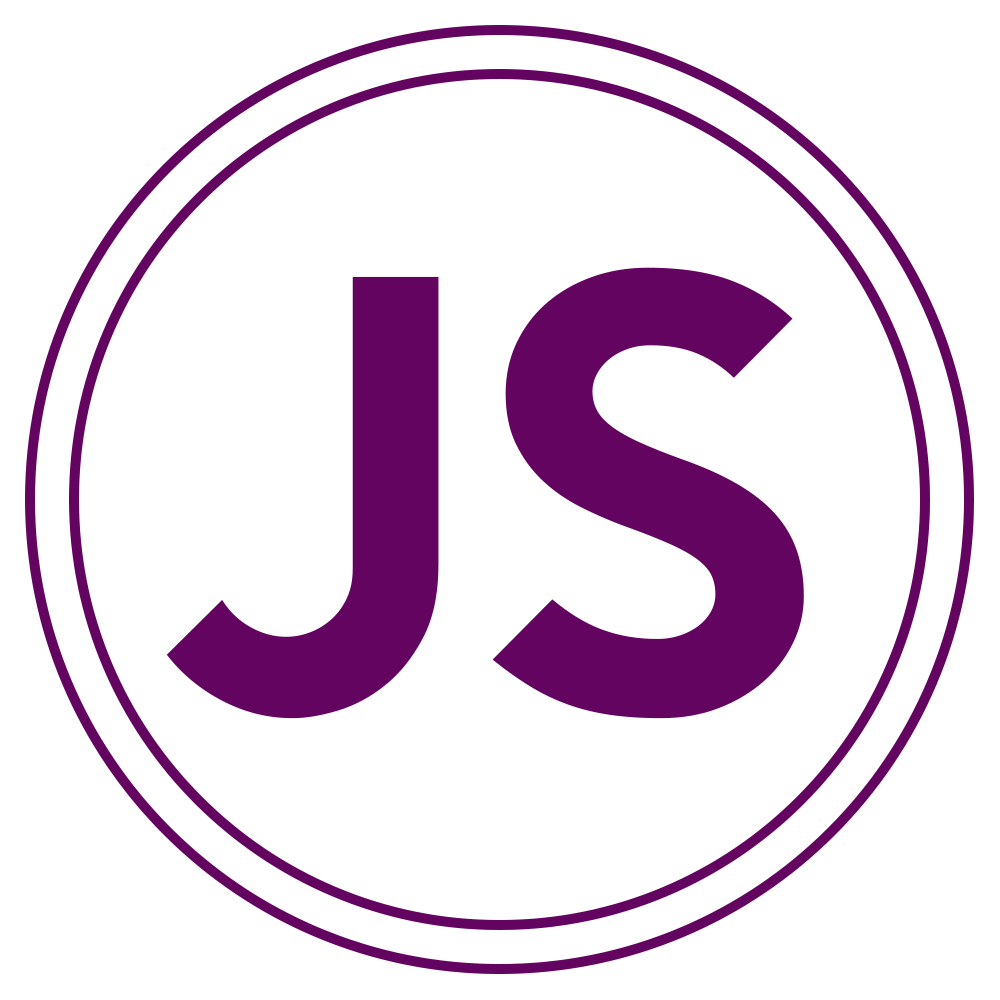
<style>
.page{position:relative;width:1000px;height:1000px;background:#ffffff}
.page>*{position:absolute;margin:0}
.t1{font:541.7px "KeepCalm-Medium";color:#630460}
</style>
<div class="page">
<p class="t1" style="left:166px;top:267px;width:638px;height:452px">JS</p>
</div>
